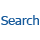
<style>
.page{position:relative;width:40px;height:40px;background:#ffffff}
.page>*{position:absolute;margin:0}
.t1{font:13px "Tahoma";color:#165a9b}
</style>
<div class="page">
<p class="t1" style="left:1px;top:15px;width:38px;height:10px">Search</p>
</div>
